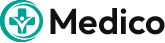
<style>
.page{position:relative;width:165px;height:43px;background:#ffffff}
.page>*{position:absolute;margin:0}
.t1{font:36px "Outfit-SemiBold";color:#111111}
</style>
<div class="page">
<p class="t1" style="left:50px;top:8px;width:115px;height:27px">Medico</p>
</div>
